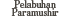
<style>
.page{position:relative;width:70px;height:18px;background:#ffffff}
.page>*{position:absolute;margin:0}
.t1{font:10px/8px "RyuminPro-ExBold";letter-spacing:-0.04em;color:#4c4843;scale:0.9 1}
</style>
<div class="page">
<p class="t1" style="left:11px;top:0px;width:48px;height:17px;text-align:center">Pelabuhan<br>Paramushir</p>
</div>
